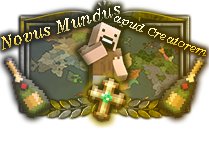
<style>
.page{position:relative;width:209px;height:150px;background:#ffffff}
.page>*{position:absolute;margin:0}
.t1{font:16.7px "News701BT-ItalicA"}
.t2{font:13px "News701BT-ItalicA"}
.t3{font:11.9px "News701BT-ItalicA"}
.t4{font:9.3px "News701BT-ItalicA"}
</style>
<div class="page">
<p class="t1" style="left:1px;top:6px;width:119px;height:44px;rotate:-17deg"><span class="t2"><br></span>Novus Mundus</p>
<p class="t3" style="left:114px;top:16px;width:92px;height:40px;rotate:22deg"><span class="t4"><br></span>apud Creatorem</p>
</div>
